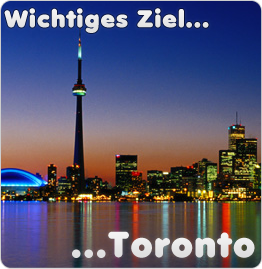
<style>
.page{position:relative;width:262px;height:269px}
.page>*{position:absolute;margin:0}
.t1{font:40px "AnjaElianeaccent-Nornal";letter-spacing:0.05em;color:#e9e9e9}
.t2{font:60px "AnjaElianeaccent-Nornal";letter-spacing:0.05em;color:#e6e6e6}
</style>
<div class="page">
<p class="t1" style="left:4px;top:8px;width:205px;height:25px">Wichtiges Ziel...</p>
<p class="t2" style="left:72px;top:231px;width:183px;height:27px">...Toronto</p>
</div>
